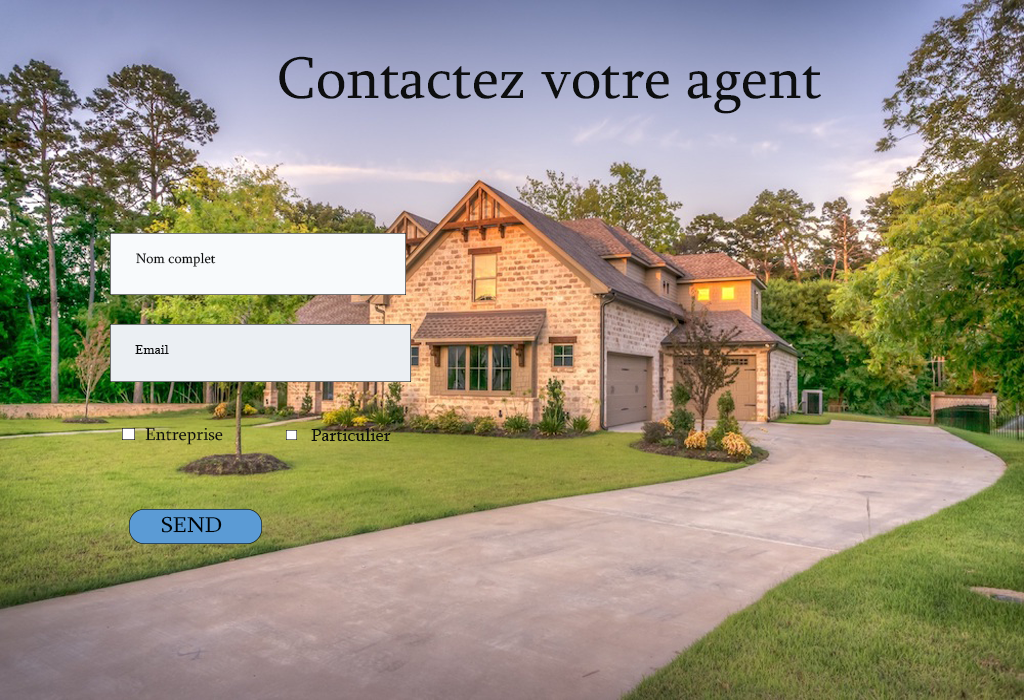
<style>
.page{position:relative;width:1024px;height:700px}
.page>*{position:absolute;margin:0}
.t1{font:60px "Sylfaen";color:#0d0e0f}
.t2{font:14px "Sylfaen";color:#0d0e0f}
.t3{font:17.7px "Sylfaen";color:#0d0e0f}
.t4{font:18px "Sylfaen";color:#0d0e0f}
.t5{font:22.1px "Sylfaen";color:#000407;scale:1.1 1}
</style>
<div class="page">
<p class="t1" style="left:279px;top:56px;width:542px;height:58px">Contactez votre agent</p>
<p class="t2" style="left:136px;top:252px;width:80px;height:15px">Nom complet</p>
<p class="t2" style="left:135px;top:345px;width:34px;height:9px">Email</p>
<p class="t3" style="left:145px;top:427px;width:78px;height:18px">Entreprise</p>
<p class="t4" style="left:311px;top:428px;width:80px;height:13px">Particulier</p>
<p class="t5" style="left:161px;top:516px;width:61px;height:17px">SEND</p>
</div>
